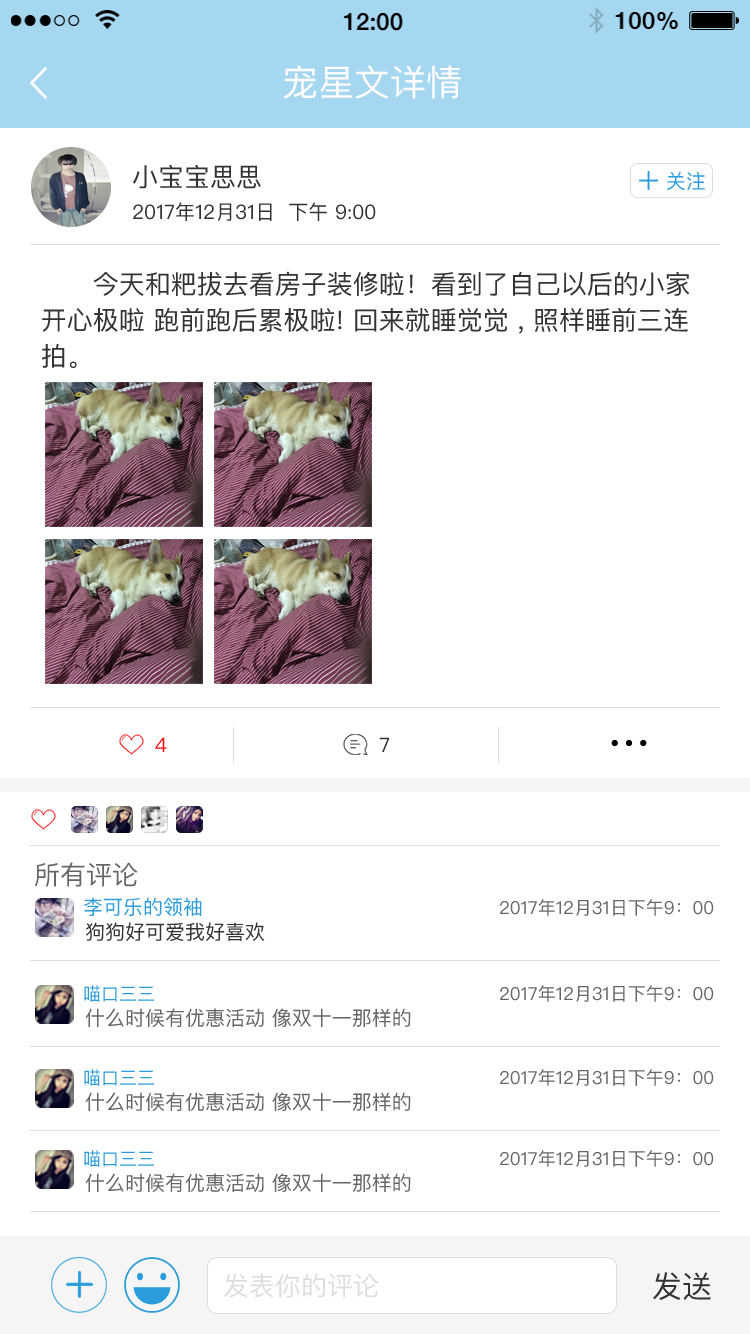
<style>
.page{position:relative;width:750px;height:1334px;background:#ffffff}
.page>*{position:absolute;margin:0}
.t1{font:36px "PingFangSC-Regular";color:#fffcfc}
.t2{font:26px "PingFangSC";color:#333333}
.t3{font:20px "PingFangSC";color:#2a9cda}
.t4{font:20px "PingFangSC";color:#333333}
.t5{font:26px/36px "PingFangSC";color:#333333}
.t6{font:20px "PingFangSC";color:#ff0000}
.t7{font:26px "PingFangSC";color:#666666}
.t8{font:18px "PingFangSC";color:#666666}
.t9{font:18px "PingFangSC";color:#2a9cda}
.t10{font:20px "PingFangSC";color:#666666}
.t11{font:26px "PingFangSC";color:#dddddd}
.t12{font:30px "PingFangSC";color:#333333}
</style>
<div class="page">
<p class="t1" style="left:283px;top:65px;width:178px;height:34px">宠星文详情</p>
<p class="t2" style="left:133px;top:164px;width:128px;height:25px">小宝宝思思</p>
<p class="t3" style="left:666px;top:171px;width:39px;height:20px">关注</p>
<p class="t4" style="left:133px;top:202px;width:243px;height:19px">2017年12月31日  下午 9:00</p>
<p class="t5" style="left:42px;top:271px;width:648px;height:97px">今天和粑拔去看房子装修啦！看到了自己以后的小家开心极啦 跑前跑后累极啦! 回来就睡觉觉 , 照样睡前三连拍。</p>
<p class="t6" style="left:155px;top:737px;width:12px;height:15px">4</p>
<p class="t4" style="left:379px;top:737px;width:10px;height:15px">7</p>
<p class="t7" style="left:35px;top:862px;width:103px;height:25px">所有评论</p>
<p class="t3" style="left:84px;top:897px;width:118px;height:19px">李可乐的领袖</p>
<p class="t8" style="left:500px;top:899px;width:214px;height:17px">2017年12月31日下午9：00</p>
<p class="t4" style="left:86px;top:922px;width:179px;height:19px">狗狗好可爱我好喜欢</p>
<p class="t9" style="left:84px;top:985px;width:70px;height:17px">喵口三三</p>
<p class="t8" style="left:500px;top:985px;width:214px;height:17px">2017年12月31日下午9：00</p>
<p class="t10" style="left:85px;top:1008px;width:326px;height:19px">什么时候有优惠活动 像双十一那样的</p>
<p class="t9" style="left:84px;top:1069px;width:70px;height:17px">喵口三三</p>
<p class="t8" style="left:500px;top:1069px;width:214px;height:17px">2017年12月31日下午9：00</p>
<p class="t10" style="left:85px;top:1092px;width:326px;height:19px">什么时候有优惠活动 像双十一那样的</p>
<p class="t9" style="left:84px;top:1150px;width:70px;height:17px">喵口三三</p>
<p class="t8" style="left:500px;top:1150px;width:214px;height:17px">2017年12月31日下午9：00</p>
<p class="t10" style="left:85px;top:1173px;width:326px;height:19px">什么时候有优惠活动 像双十一那样的</p>
<p class="t11" style="left:224px;top:1273px;width:155px;height:25px">发表你的评论</p>
<p class="t12" style="left:653px;top:1272px;width:58px;height:28px">发送</p>
</div>
